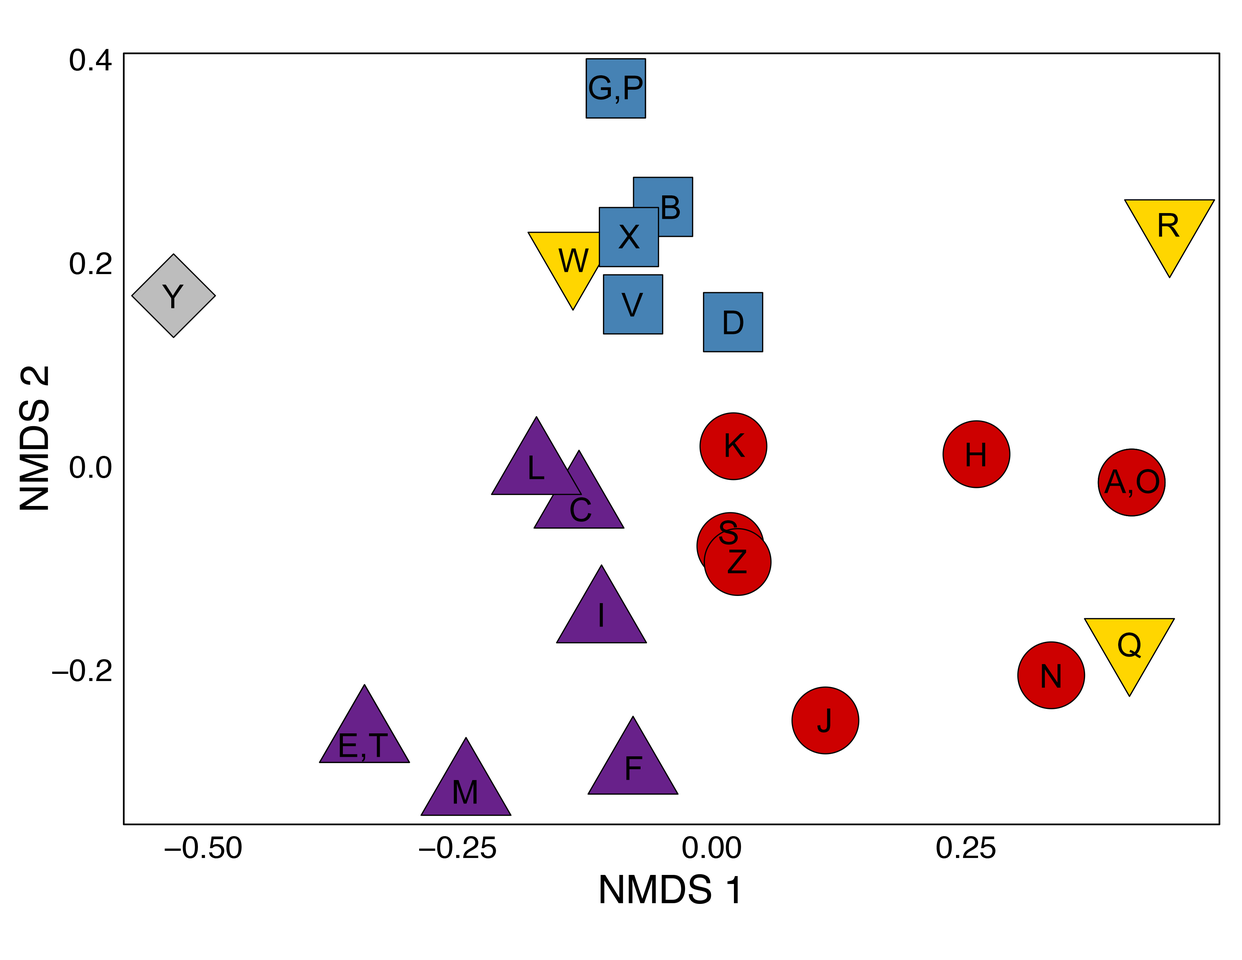
<style>
.page{position:relative;width:1242px;height:960px;background:#ffffff}
.page>*{position:absolute;margin:0}
.t1{font:32.9px "ArialMT";color:#000000}
</style>
<div class="page">
<p class="t1" style="left:589px;top:75px;width:54px;height:29px">G,P</p>
<p class="t1" style="left:662px;top:195px;width:18px;height:24px">B</p>
<p class="t1" style="left:1159px;top:213px;width:21px;height:24px">R</p>
<p class="t1" style="left:618px;top:225px;width:22px;height:23px">X</p>
<p class="t1" style="left:558px;top:248px;width:31px;height:24px">W</p>
<p class="t1" style="left:162px;top:285px;width:22px;height:23px">Y</p>
<p class="t1" style="left:621px;top:293px;width:22px;height:24px">V</p>
<p class="t1" style="left:724px;top:311px;width:19px;height:23px">D</p>
<p class="t1" style="left:726px;top:433px;width:19px;height:24px">K</p>
<p class="t1" style="left:967px;top:443px;width:19px;height:23px">H</p>
<p class="t1" style="left:529px;top:455px;width:15px;height:24px">L</p>
<p class="t1" style="left:1104px;top:469px;width:55px;height:29px">A,O</p>
<p class="t1" style="left:570px;top:497px;width:22px;height:25px">C</p>
<p class="t1" style="left:719px;top:520px;width:19px;height:25px">S</p>
<p class="t1" style="left:728px;top:550px;width:19px;height:23px">Z</p>
<p class="t1" style="left:600px;top:603px;width:3px;height:24px">I</p>
<p class="t1" style="left:1118px;top:632px;width:23px;height:26px">Q</p>
<p class="t1" style="left:1042px;top:664px;width:19px;height:24px">N</p>
<p class="t1" style="left:818px;top:708px;width:12px;height:25px">J</p>
<p class="t1" style="left:340px;top:733px;width:48px;height:29px">E,T</p>
<p class="t1" style="left:626px;top:756px;width:17px;height:24px">F</p>
<p class="t1" style="left:454px;top:780px;width:23px;height:24px">M</p>
</div>
